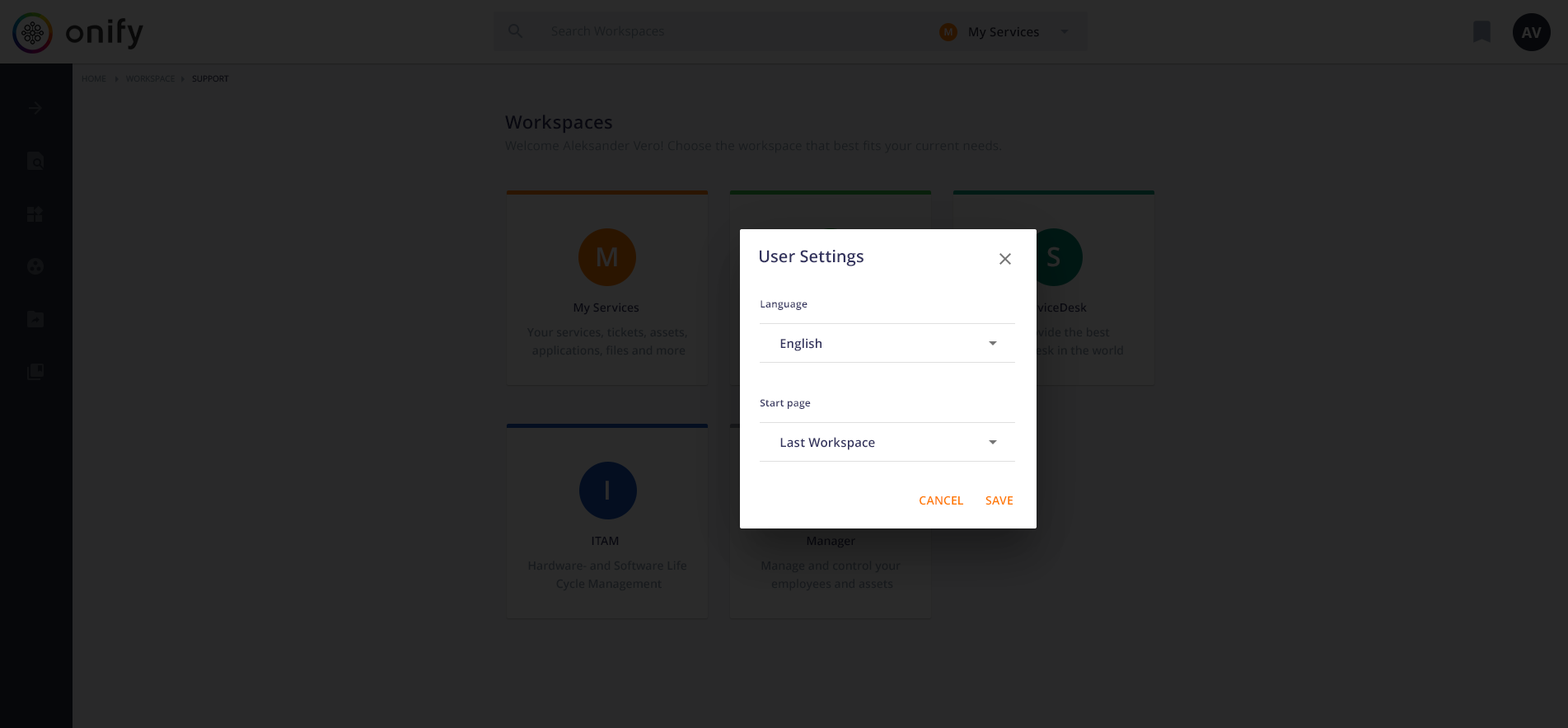
<style>
.page{position:relative;width:1568px;height:728px;background:#29292a}
.page>*{position:absolute;margin:0}
.t1{font:12.4px "OpenSans";letter-spacing:0.01em;color:#171a1d}
.t2{font:9.9px "OpenSans-Semibold";letter-spacing:0.01em;color:#2b2b2b}
.t3{font:12.4px "OpenSans-Semibold";letter-spacing:0.01em;color:#06060a}
.t4{font:14.8px "OpenSans-Bold";color:#2b2b2b;text-transform:uppercase}
.t5{font:8.2px "OpenSans";color:#171a1d;text-transform:uppercase}
.t6{font:8.2px "OpenSans";text-transform:uppercase}
.t7{font:18.1px "OpenSans-Semibold";letter-spacing:0.02em;color:#080810}
.t8{font:12.4px "OpenSans";letter-spacing:0.02em;color:#171a1d}
.t9{font:26.4px "OpenSans-Semibold";letter-spacing:0.005em;color:#2b2b2b}
.t10{font:16.5px "OpenSans-Semibold";letter-spacing:0.005em;color:#32325d}
.t11{font:26.4px "OpenSans-Semibold";letter-spacing:0.005em;color:#292929}
.t12{font:11.5px "OpenSans-Semibold";letter-spacing:0.005em;color:#080810}
.t13{font:9.9px "OpenSans-Semibold";letter-spacing:0.02em;color:#32325d}
.t14{font:11.5px/18.1px "OpenSans-Semibold";color:#171a1d}
.t15{font:12.4px "OpenSans-Semibold";letter-spacing:0.01em;color:#32325d}
.t16{font:11.5px "OpenSans-Semibold";letter-spacing:0.01em;color:#ff7b00}
.t17{font:11.5px "OpenSans-Semibold";letter-spacing:0.005em;color:#06060c}
.t18{font:11.5px/18.1px "OpenSans-Semibold";color:#15181b}
</style>
<div class="page">
<p class="t1" style="left:551px;top:26px;width:113px;height:13px">Search Workspaces</p>
<p class="t2" style="left:944px;top:28px;width:9px;height:7px">M</p>
<p class="t3" style="left:969px;top:26px;width:70px;height:14px">My Services</p>
<p class="t4" style="left:1521px;top:27px;width:21px;height:11px">AV</p>
<p class="t5" style="left:82px;top:75px;width:24px;height:7px">Home</p>
<p class="t5" style="left:126px;top:75px;width:49px;height:7px">Workspace</p>
<p class="t6" style="left:192px;top:75px;width:37px;height:7px">Support</p>
<p class="t7" style="left:505px;top:115px;width:107px;height:18px">Workspaces</p>
<p class="t8" style="left:505px;top:140px;width:497px;height:13px">Welcome Aleksander Vero! Choose the workspace that best fits your current needs.</p>
<p class="t9" style="left:597px;top:247px;width:20px;height:19px">M</p>
<p class="t10" style="left:760px;top:250px;width:104px;height:16px">User Settings</p>
<p class="t11" style="left:1047px;top:246px;width:13px;height:21px">S</p>
<p class="t12" style="left:573px;top:302px;width:66px;height:13px">My Services</p>
<p class="t13" style="left:761px;top:300px;width:46px;height:10px">Language</p>
<p class="t14" style="left:527px;top:327px;width:160px;height:31px;text-align:center">Your services, tickets, assets, <br>applications, files and more</p>
<p class="t15" style="left:780px;top:338px;width:41px;height:13px">English</p>
<p class="t13" style="left:760px;top:399px;width:51px;height:10px">Start page</p>
<p class="t15" style="left:780px;top:437px;width:95px;height:13px">Last Workspace</p>
<p class="t9" style="left:606px;top:480px;width:3px;height:19px">I</p>
<p class="t16" style="left:920px;top:495px;width:43px;height:10px">CANCEL</p>
<p class="t16" style="left:985px;top:495px;width:28px;height:10px">SAVE</p>
<p class="t12" style="left:592px;top:536px;width:27px;height:9px">ITAM</p>
<p class="t17" style="left:807px;top:536px;width:48px;height:12px">Manager</p>
<p class="t14" style="left:528px;top:560px;width:158px;height:31px;text-align:center">Hardware- and Software Life <br>Cycle Management</p>
<p class="t18" style="left:761px;top:560px;width:140px;height:31px;text-align:center">Manage and control your <br>employees and assets</p>
</div>
